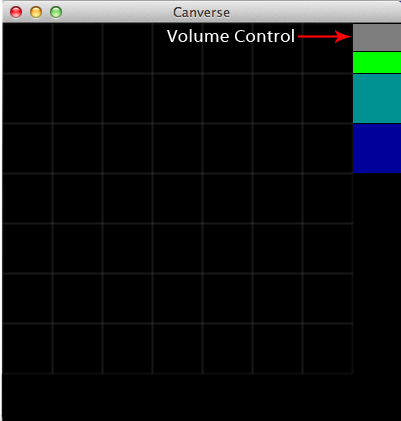
<style>
.page{position:relative;width:401px;height:421px;background:#000000}
.page>*{position:absolute;margin:0}
.t1{font:18px "MyriadWebPro";letter-spacing:0.025em;color:#fefefe}
</style>
<div class="page">
<p class="t1" style="left:167px;top:29px;width:127px;height:13px">Volume Control</p>
</div>
